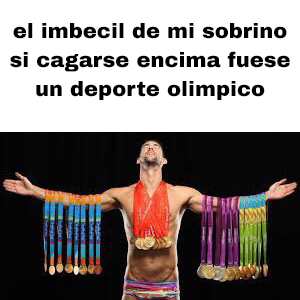
<style>
.page{position:relative;width:300px;height:300px;background:#ffffff}
.page>*{position:absolute;margin:0}
.t1{font:21px "ArchivoBlack-Regular";color:#000000}
</style>
<div class="page">
<p class="t1" style="left:10px;top:23px;width:280px;height:77px;text-align:center">el imbecil de mi sobrino<br>si cagarse encima fuese<br>un deporte olimpico</p>
</div>
